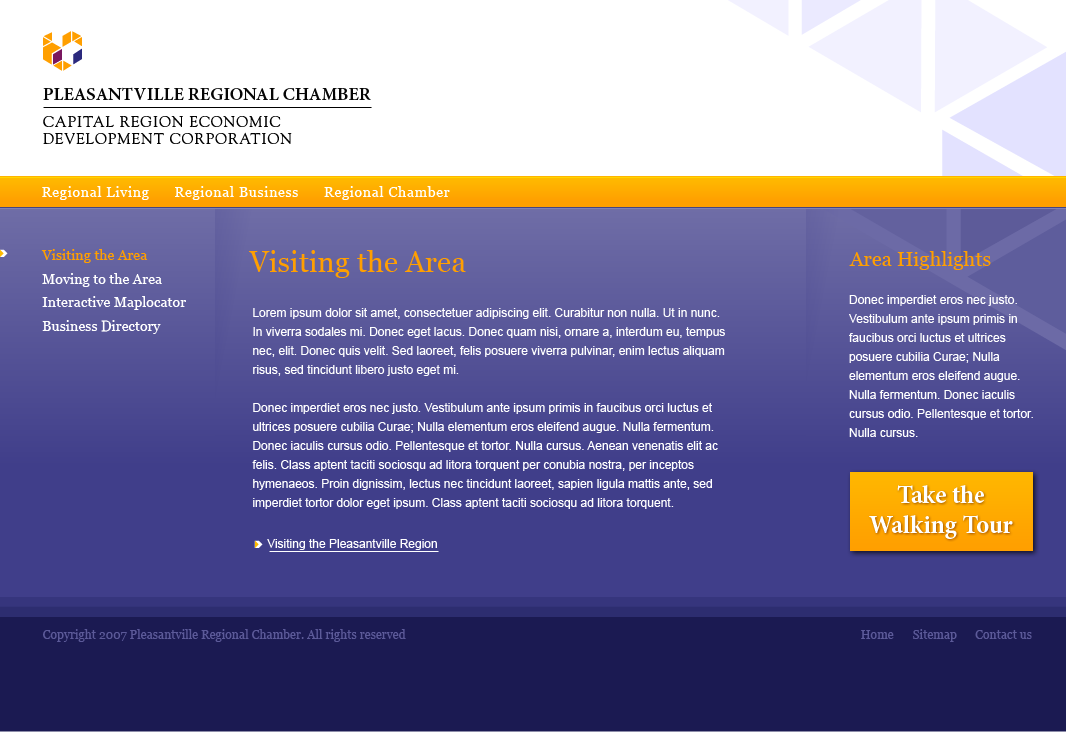
<style>
.page{position:relative;width:1066px;height:732px;background:#ffffff}
.page>*{position:absolute;margin:0}
.t1{font:18px "MinionPro-Semibold";letter-spacing:0.007em;color:#050505}
.t2{font:14px "Georgia";letter-spacing:0.051em;color:#ffffff}
.t3{font:14px "Georgia";letter-spacing:0.007em;color:#ff9f00}
.t4{font:28.9px "Georgia";letter-spacing:0.007em;color:#ff9f00}
.t5{font:20px "Georgia";letter-spacing:0.007em;color:#ff9f00}
.t6{font:14px "Georgia";letter-spacing:0.007em;color:#ffffff}
.t7{font:12px/19px "ArialMT";color:#ffffff}
.t8{font:25px/30px "MinionPro-Bold";color:#ffffff}
.t9{font:12px "ArialMT";color:#ffffff}
.t10{font:12px "Georgia";letter-spacing:0.007em;color:#5c5a99}
</style>
<div class="page">
<p class="t1" style="left:43px;top:87px;width:328px;height:13px">PLEASANTVILLE REGIONAL CHAMBER</p>
<p class="t2" style="left:42px;top:186px;width:107px;height:14px">Regional Living</p>
<p class="t2" style="left:175px;top:186px;width:123px;height:14px">Regional Business</p>
<p class="t2" style="left:324px;top:186px;width:126px;height:14px">Regional Chamber</p>
<p class="t3" style="left:41px;top:249px;width:107px;height:14px">Visiting the Area</p>
<p class="t4" style="left:249px;top:250px;width:217px;height:28px">Visiting the Area</p>
<p class="t5" style="left:849px;top:251px;width:142px;height:19px">Area Highlights</p>
<p class="t6" style="left:42px;top:273px;width:120px;height:14px">Moving to the Area</p>
<p class="t6" style="left:42px;top:296px;width:144px;height:14px">Interactive Maplocator</p>
<p class="t7" style="left:849px;top:295px;width:184px;height:142px">Donec imperdiet eros nec justo. Vestibulum ante ipsum primis in faucibus orci luctus et ultrices posuere cubilia Curae; Nulla elementum eros eleifend augue. Nulla fermentum. Donec iaculis cursus odio. Pellentesque et tortor. Nulla cursus.</p>
<p class="t7" style="left:252px;top:308px;width:473px;height:201px">Lorem ipsum dolor sit amet, consectetuer adipiscing elit. Curabitur non nulla. Ut in nunc. In viverra sodales mi. Donec eget lacus. Donec quam nisi, ornare a, interdum eu, tempus nec, elit. Donec quis velit. Sed laoreet, felis posuere viverra pulvinar, enim lectus aliquam risus, sed tincidunt libero justo eget mi. <br><br>Donec imperdiet eros nec justo. Vestibulum ante ipsum primis in faucibus orci luctus et ultrices posuere cubilia Curae; Nulla elementum eros eleifend augue. Nulla fermentum. Donec iaculis cursus odio. Pellentesque et tortor. Nulla cursus. Aenean venenatis elit ac felis. Class aptent taciti sociosqu ad litora torquent per conubia nostra, per inceptos hymenaeos. Proin dignissim, lectus nec tincidunt laoreet, sapien ligula mattis ante, sed imperdiet tortor dolor eget ipsum. Class aptent taciti sociosqu ad litora torquent.</p>
<p class="t6" style="left:42px;top:320px;width:119px;height:14px">Business Directory</p>
<p class="t8" style="left:869px;top:485px;width:144px;height:54px;text-align:center">Take the<br>Walking Tour</p>
<p class="t9" style="left:267px;top:539px;width:170px;height:11px">Visiting the Pleasantville Region</p>
<p class="t10" style="left:43px;top:629px;width:363px;height:13px">Copyright 2007 Pleasantville Regional Chamber. All rights reserved</p>
<p class="t10" style="left:861px;top:630px;width:33px;height:9px">Home</p>
<p class="t10" style="left:913px;top:629px;width:44px;height:13px">Sitemap</p>
<p class="t10" style="left:975px;top:630px;width:57px;height:9px">Contact us</p>
</div>
